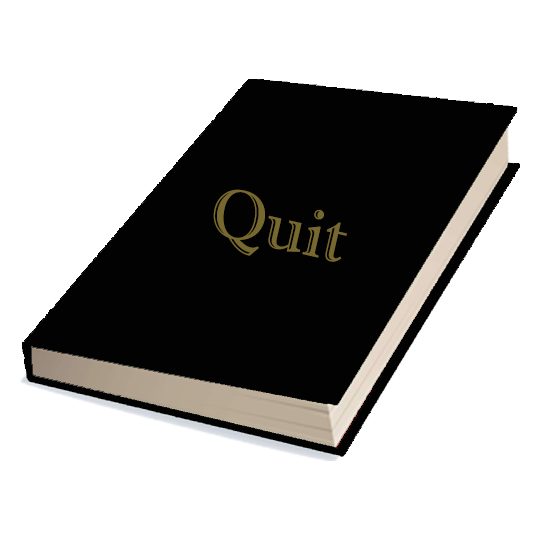
<style>
.page{position:relative;width:540px;height:540px;background:#ffffff}
.page>*{position:absolute;margin:0}
.t1{font:69.5px "ImprintMT-Shadow";color:#76682f}
</style>
<div class="page">
<p class="t1" style="left:213px;top:189px;width:134px;height:73px;rotate:13deg">Quit</p>
</div>
